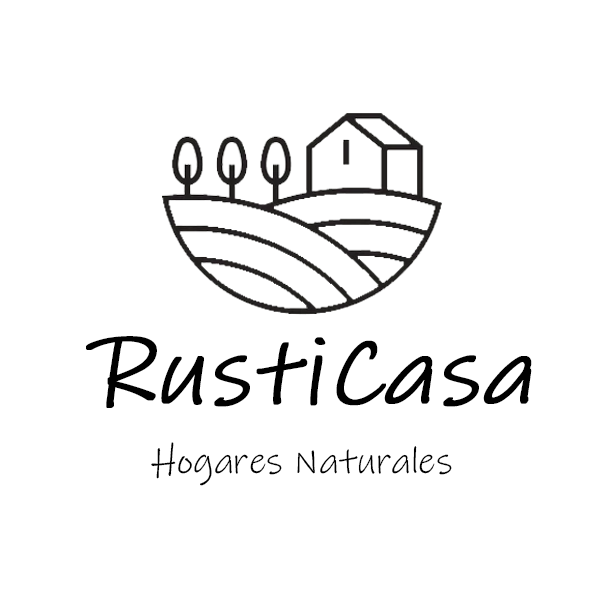
<style>
.page{position:relative;width:600px;height:600px;background:#ffffff}
.page>*{position:absolute;margin:0}
.t1{font:95.4px "InkFree";letter-spacing:0.01em;color:#010101;font-weight:bold;font-style:italic}
.t2{font:37.5px "InkFree";color:#010101}
</style>
<div class="page">
<p class="t1" style="left:86px;top:336px;width:446px;height:72px">RustiCasa</p>
<p class="t2" style="left:151px;top:442px;width:301px;height:44px">Hogares Naturales</p>
</div>
